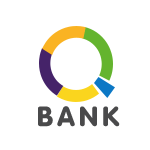
<style>
.page{position:relative;width:150px;height:150px;background:#ffffff}
.page>*{position:absolute;margin:0}
.t1{font:27px "18VAGRoundedMBold";letter-spacing:0.15em;color:#4a4a4b;font-weight:bold}
</style>
<div class="page">
<p class="t1" style="left:38px;top:106px;width:82px;height:21px">BANK</p>
</div>
